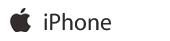
<style>
.page{position:relative;width:170px;height:41px;background:#ffffff}
.page>*{position:absolute;margin:0}
.t1{font:24px "Myriad-Apple";color:#2b2b2a}
</style>
<div class="page">
<p class="t1" style="left:44px;top:12px;width:68px;height:19px">iPhone</p>
</div>
